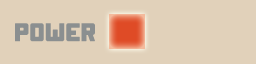
<style>
.page{position:relative;width:256px;height:64px;background:#e1d1ba}
.page>*{position:absolute;margin:0}
.t1{font:30px "UyghurDemo";color:#8b8f90;font-variant:small-caps;font-weight:bold}
</style>
<div class="page">
<p class="t1" style="left:15px;top:23px;width:80px;height:19px">power</p>
</div>
